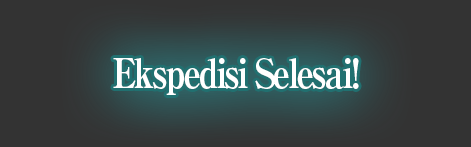
<style>
.page{position:relative;width:471px;height:147px;background:#333333}
.page>*{position:absolute;margin:0}
.t1{font:40px "RyuminPro-ExBold";letter-spacing:-0.08em;color:#ffffff;scale:0.9 1}
</style>
<div class="page">
<p class="t1" style="left:113px;top:58px;width:246px;height:37px">Ekspedisi Selesai!</p>
</div>
